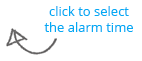
<style>
.page{position:relative;width:142px;height:61px;background:#ffffff}
.page>*{position:absolute;margin:0}
.t1{font:13px "OpenSans";color:#03a9f4}
</style>
<div class="page">
<p class="t1" style="left:44px;top:6px;width:89px;height:26px;text-align:center">click to select<br>the alarm time</p>
</div>
